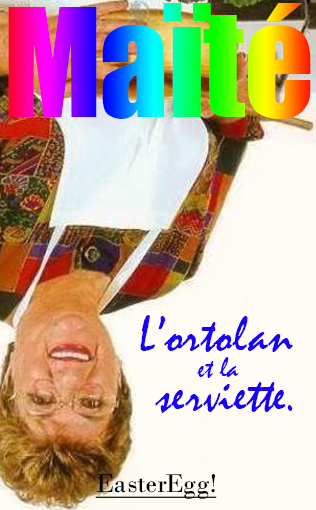
<style>
.page{position:relative;width:316px;height:510px;background:#fffcf5}
.page>*{position:absolute;margin:0}
.t1{font:50.8px "Mistral";color:#1800ff}
.t2{font:50.8px/17.6px "Mistral";color:#1800ff}
.t3{font:29.5px "Mistral";color:#1800ff}
.t4{font:27.1px "BodoniMT";color:#000000;text-decoration:underline}
</style>
<div class="page">
<p class="t1" style="left:140px;top:315px;width:153px;height:98px;text-align:center">L’o<span class="t2">rtolan  <br></span>serviette.</p>
<p class="t3" style="left:197px;top:357px;width:42px;height:21px">et la</p>
<p class="t4" style="left:95px;top:474px;width:122px;height:25px">EasterEgg!</p>
</div>
